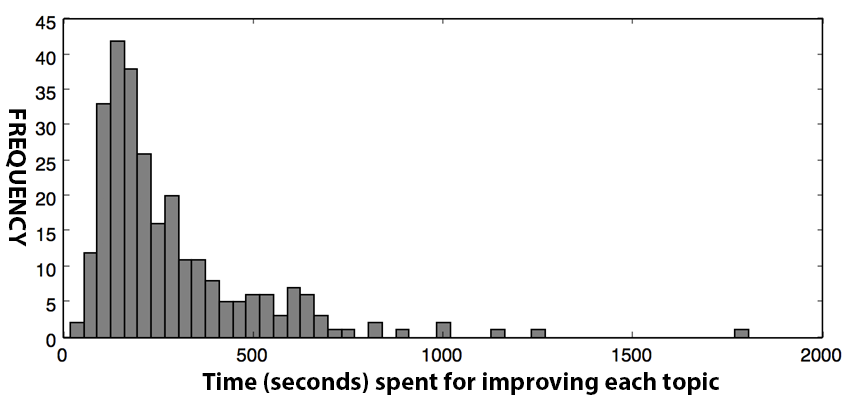
<style>
.page{position:relative;width:851px;height:405px;background:#ffffff}
.page>*{position:absolute;margin:0}
.t1{font:25.4px "MyriadPro-Bold";color:#000000}
</style>
<div class="page">
<p class="t1" style="left:5px;top:109px;width:21px;height:138px;rotate:90deg">FREQUENCY</p>
<p class="t1" style="left:202px;top:372px;width:517px;height:23px">Time (seconds) spent for improving each topic</p>
</div>
